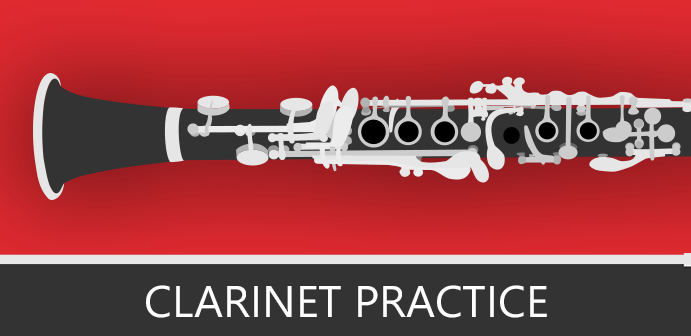
<style>
.page{position:relative;width:691px;height:336px;background:#333333}
.page>*{position:absolute;margin:0}
.t1{font:44.4px "SegoeWP";color:#ffffff}
</style>
<div class="page">
<p class="t1" style="left:146px;top:285px;width:401px;height:33px">CLARINET PRACTICE</p>
</div>
